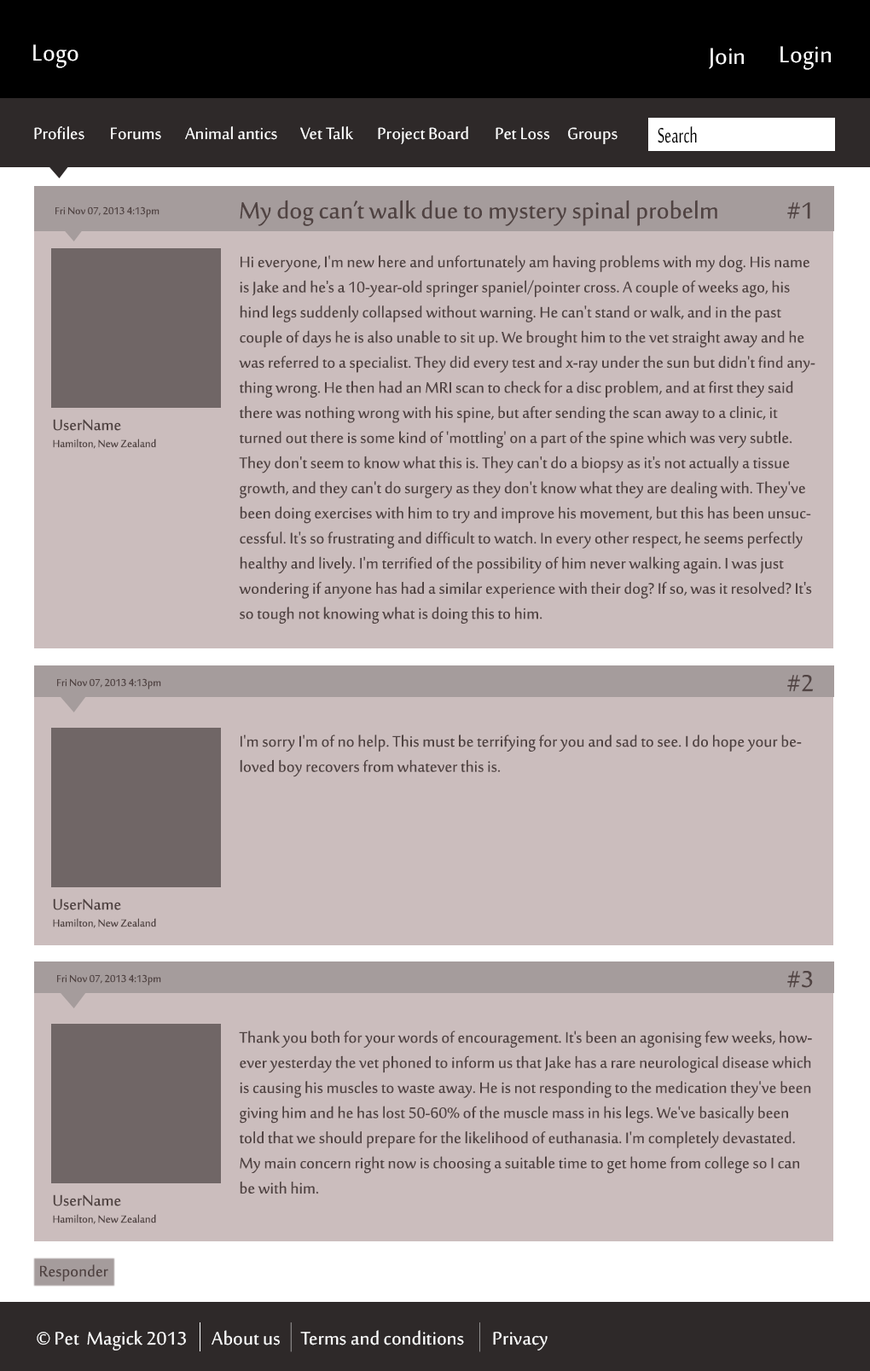
<style>
.page{position:relative;width:870px;height:1371px;background:#cbbdbd}
.page>*{position:absolute;margin:0}
.t1{font:31.4px "SakkalMajalla";color:#ffffff}
.t2{font:22.3px "SakkalMajalla";color:#ffffff}
.t3{font:28.9px "SakkalMajalla";color:#000000;scale:0.67 1}
.t4{font:13.6px "SakkalMajalla";color:#504342}
.t5{font:32px "SakkalMajalla";color:#504342}
.t6{font:20.9px "SakkalMajalla";color:#504342}
.t7{font:14.1px "SakkalMajalla";color:#504342}
.t8{font:25px "SakkalMajalla";color:#ffffff}
</style>
<div class="page">
<p class="t1" style="left:33px;top:44px;width:45px;height:24px">Logo</p>
<p class="t1" style="left:709px;top:48px;width:35px;height:21px">Join</p>
<p class="t1" style="left:780px;top:46px;width:51px;height:24px">Login</p>
<p class="t2" style="left:34px;top:126px;width:50px;height:14px">Profiles</p>
<p class="t2" style="left:111px;top:127px;width:50px;height:13px">Forums</p>
<p class="t2" style="left:185px;top:126px;width:92px;height:14px">Animal antics</p>
<p class="t2" style="left:300px;top:126px;width:53px;height:14px">Vet Talk</p>
<p class="t2" style="left:378px;top:126px;width:90px;height:18px">Project Board</p>
<p class="t2" style="left:496px;top:127px;width:54px;height:13px">Pet Loss</p>
<p class="t2" style="left:568px;top:127px;width:50px;height:17px">Groups</p>
<p class="t3" style="left:658px;top:126px;width:39px;height:17px">Search</p>
<p class="t4" style="left:55px;top:206px;width:104px;height:11px">Fri Nov 07, 2013 4:13pm</p>
<p class="t5" style="left:240px;top:200px;width:477px;height:26px">My dog can’t walk due to mystery spinal probelm</p>
<p class="t5" style="left:787px;top:202px;width:23px;height:17px">#1</p>
<p class="t6" style="left:239px;top:255px;width:576px;height:369px">Hi everyone, I'm new here and unfortunately am having problems with my dog. His name is Jake and he's a 10-year-old springer spaniel/pointer cross. A couple of weeks ago, his hind legs suddenly collapsed without warning. He can't stand or walk, and in the past couple of days he is also unable to sit up. We brought him to the vet straight away and he was referred to a specialist. They did every test and x-ray under the sun but didn't find anything wrong. He then had an MRI scan to check for a disc problem, and at first they said there was nothing wrong with his spine, but after sending the scan away to a clinic, it turned out there is some kind of 'mottling' on a part of the spine which was very subtle. They don't seem to know what this is. They can't do a biopsy as it's not actually a tissue growth, and they can't do surgery as they don't know what they are dealing with. They've been doing exercises with him to try and improve his movement, but this has been unsuccessful. It's so frustrating and difficult to watch. In every other respect, he seems perfectly healthy and lively. I'm terrified of the possibility of him never walking again. I was just wondering if anyone has had a similar experience with their dog? If so, was it resolved? It's so tough not knowing what is doing this to him.</p>
<p class="t7" style="left:53px;top:419px;width:103px;height:30px"><span class="t6">UserName<br></span>Hamilton, New Zealand</p>
<p class="t5" style="left:787px;top:675px;width:27px;height:17px">#2</p>
<p class="t4" style="left:57px;top:678px;width:104px;height:11px">Fri Nov 07, 2013 4:13pm</p>
<p class="t6" style="left:240px;top:734px;width:562px;height:43px">I'm sorry I'm of no help. This must be terrifying for you and sad to see. I do hope your beloved boy recovers from whatever this is.</p>
<p class="t7" style="left:53px;top:898px;width:103px;height:30px"><span class="t6">UserName<br></span>Hamilton, New Zealand</p>
<p class="t4" style="left:57px;top:974px;width:104px;height:11px">Fri Nov 07, 2013 4:13pm</p>
<p class="t5" style="left:787px;top:971px;width:26px;height:17px">#3</p>
<p class="t6" style="left:239px;top:1030px;width:573px;height:164px">Thank you both for your words of encouragement. It's been an agonising few weeks, however yesterday the vet phoned to inform us that Jake has a rare neurological disease which is causing his muscles to waste away. He is not responding to the medication they've been giving him and he has lost 50-60% of the muscle mass in his legs. We've basically been told that we should prepare for the likelihood of euthanasia. I'm completely devastated. My main concern right now is choosing a suitable time to get home from college so I can be with him.</p>
<p class="t7" style="left:53px;top:1194px;width:103px;height:30px"><span class="t6">UserName<br></span>Hamilton, New Zealand</p>
<p class="t6" style="left:40px;top:1264px;width:68px;height:17px">Responder</p>
<p class="t8" style="left:37px;top:1330px;width:149px;height:20px">© Pet  Magick 2013</p>
<p class="t8" style="left:212px;top:1330px;width:68px;height:15px">About us</p>
<p class="t8" style="left:300px;top:1330px;width:164px;height:15px">Terms and conditions</p>
<p class="t8" style="left:493px;top:1331px;width:55px;height:19px">Privacy</p>
</div>
